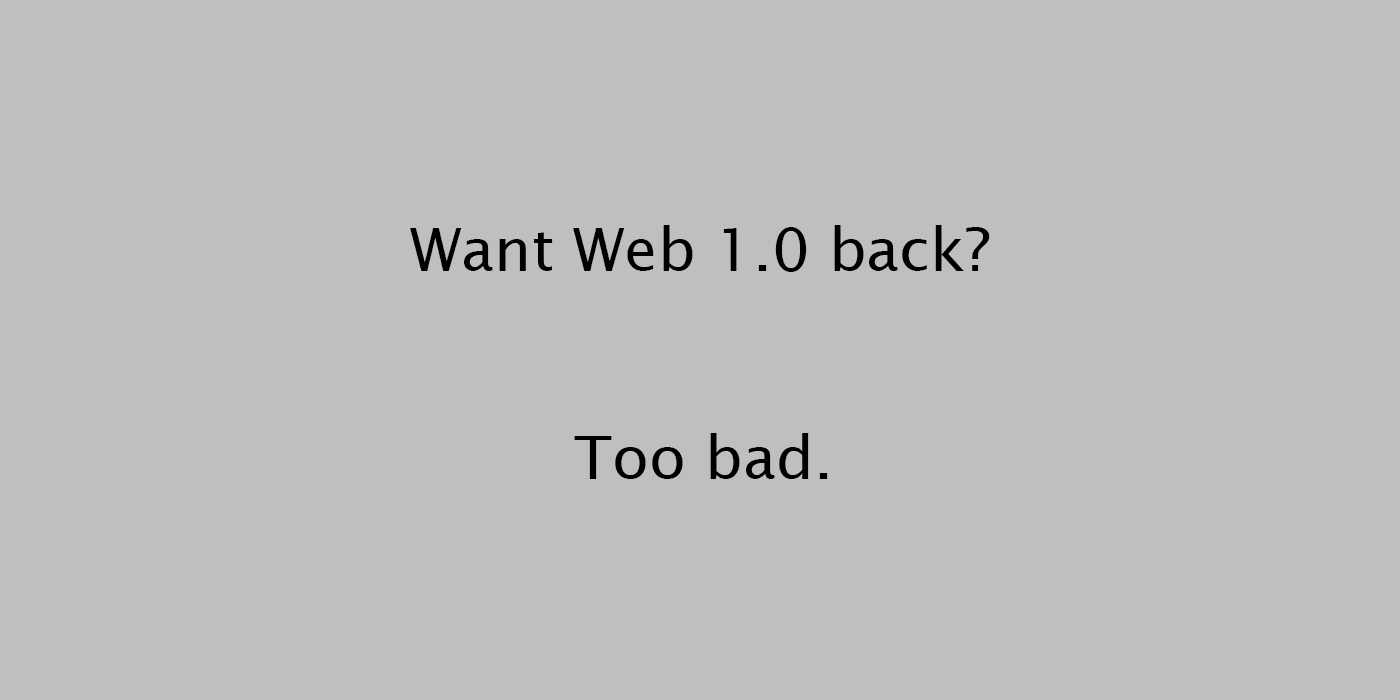
<style>
.page{position:relative;width:1400px;height:700px;background:#bfbfbf}
.page>*{position:absolute;margin:0}
.t1{font:60px "LucidaSans";color:#000000}
</style>
<div class="page">
<p class="t1" style="left:410px;top:225px;width:580px;height:47px">Want Web 1.0 back?</p>
<p class="t1" style="left:574px;top:433px;width:254px;height:46px">Too bad.</p>
</div>
